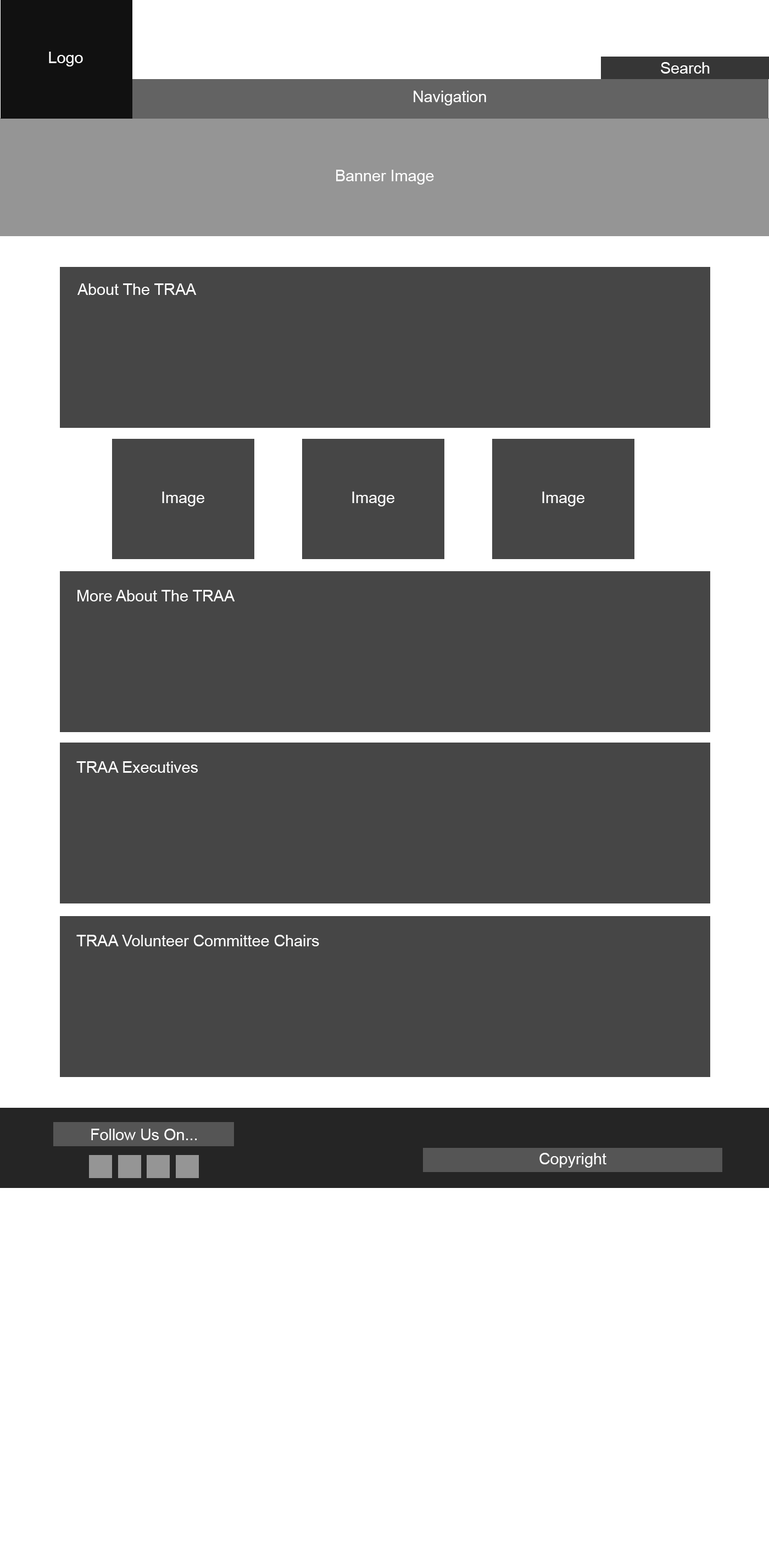
<style>
.page{position:relative;width:769px;height:1551px;background:#ffffff}
.page>*{position:absolute;margin:0}
.t1{font:15.8px "ArialMT";color:#ffffff}
</style>
<div class="page">
<p class="t1" style="left:49px;top:52px;width:34px;height:14px">Logo</p>
<p class="t1" style="left:661px;top:62px;width:49px;height:12px">Search</p>
<p class="t1" style="left:414px;top:91px;width:72px;height:14px">Navigation</p>
<p class="t1" style="left:336px;top:170px;width:98px;height:15px">Banner Image</p>
<p class="t1" style="left:77px;top:283px;width:120px;height:12px">About The TRAA</p>
<p class="t1" style="left:162px;top:492px;width:42px;height:14px">Image</p>
<p class="t1" style="left:352px;top:492px;width:42px;height:14px">Image</p>
<p class="t1" style="left:542px;top:492px;width:42px;height:14px">Image</p>
<p class="t1" style="left:77px;top:590px;width:158px;height:11px">More About The TRAA</p>
<p class="t1" style="left:76px;top:761px;width:122px;height:12px">TRAA Executives</p>
<p class="t1" style="left:76px;top:935px;width:243px;height:11px">TRAA Volunteer Committee Chairs</p>
<p class="t1" style="left:91px;top:1129px;width:106px;height:11px">Follow Us On...</p>
<p class="t1" style="left:539px;top:1153px;width:67px;height:15px">Copyright</p>
</div>
